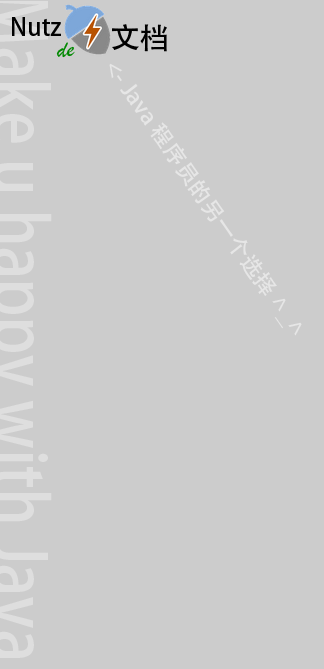
<style>
.page{position:relative;width:324px;height:669px;background:#cccccc}
.page>*{position:absolute;margin:0}
.t1{font:24px "AdobeHeitiStd-Regular";color:#000000}
.t2{font:30px "AdobeHeitiStd-Regular";color:#000000}
.t3{font:30px "AdobeHeitiStd-Regular";color:#ff00ff}
.t4{font:24px "BrushScriptMT";color:#008800}
.t5{font:21.7px "AdobeHeitiStd-Regular";color:#e6e6e6;scale:1.05 1}
</style>
<div class="page">
<p class="t1" style="left:12px;top:17px;width:49px;height:19px">Nutz</p>
<p class="t2" style="left:112px;top:24px;width:55px;height:28px"><span class="t3"> </span>文档</p>
<p class="t4" style="left:56px;top:42px;width:19px;height:16px;rotate:-4deg">de</p>
<p class="t5" style="left:109px;top:63px;width:193px;height:273px;rotate:55deg">&lt;- Java 程序员的另一个选择 ^_^</p>
</div>
